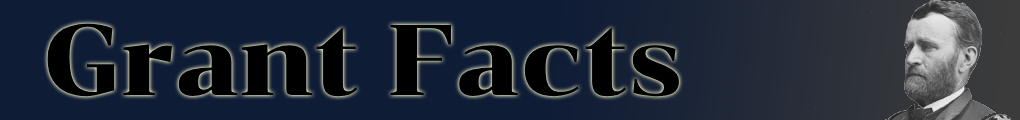
<style>
.page{position:relative;width:1020px;height:120px;background:#0f1c36}
.page>*{position:absolute;margin:0}
.t1{font:100px "Chonburi-Regular";color:#000000}
</style>
<div class="page">
<p class="t1" style="left:47px;top:23px;width:632px;height:74px">Grant Facts</p>
</div>
